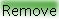
<style>
.page{position:relative;width:59px;height:20px}
.page>*{position:absolute;margin:0}
.t1{font:16.7px "Calibri";color:#000000}
</style>
<div class="page">
<p class="t1" style="left:3px;top:5px;width:53px;height:11px">Remove</p>
</div>
